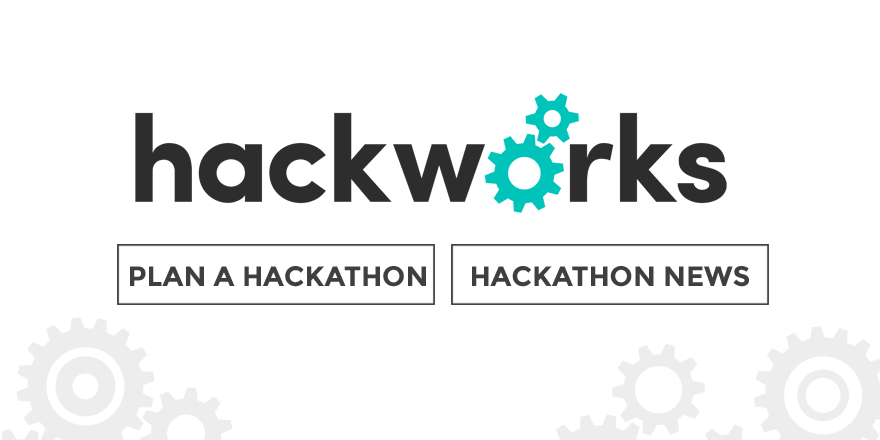
<style>
.page{position:relative;width:880px;height:440px;background:#ffffff}
.page>*{position:absolute;margin:0}
.t1{font:28px "Montserrat-Bold";color:#3f3f3f}
</style>
<div class="page">
<p class="t1" style="left:130px;top:266px;width:296px;height:21px">PLAN A HACKATHON</p>
<p class="t1" style="left:472px;top:266px;width:277px;height:21px">HACKATHON NEWS</p>
</div>
